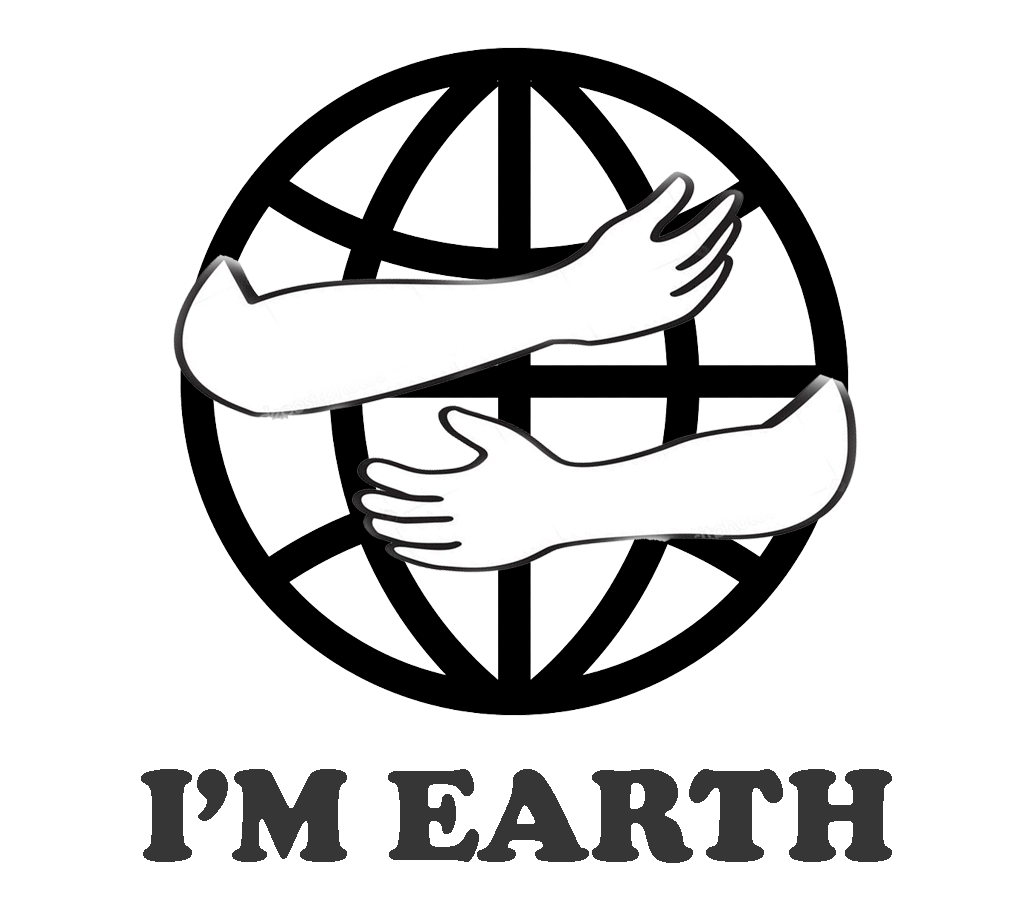
<style>
.page{position:relative;width:1024px;height:913px;background:#ffffff}
.page>*{position:absolute;margin:0}
.t1{font:134px "CooperBlack";color:#363636}
</style>
<div class="page">
<p class="t1" style="left:141px;top:769px;width:751px;height:94px">I’M EARTH</p>
</div>
